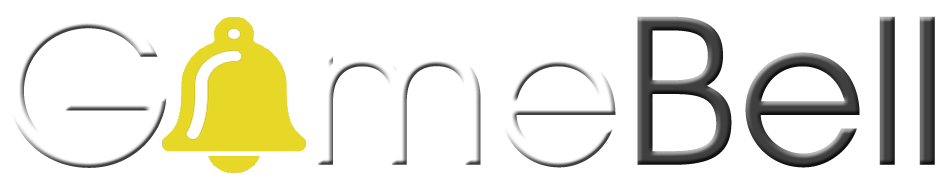
<style>
.page{position:relative;width:947px;height:189px;background:#ffffff}
.page>*{position:absolute;margin:0}
.t1{font:200.3px "TeXGyreAdventor-Regular";color:#ffffff}
.t2{font:200px "TeXGyreAdventor-Regular"}
.t3{font:200px "TeXGyreAdventor-Regular";color:#ffffff}
</style>
<div class="page">
<p class="t1" style="left:8px;top:14px;width:159px;height:154px">G</p>
<p class="t2" style="left:637px;top:16px;width:298px;height:152px">Bell</p>
<p class="t3" style="left:318px;top:52px;width:298px;height:116px">me</p>
</div>
